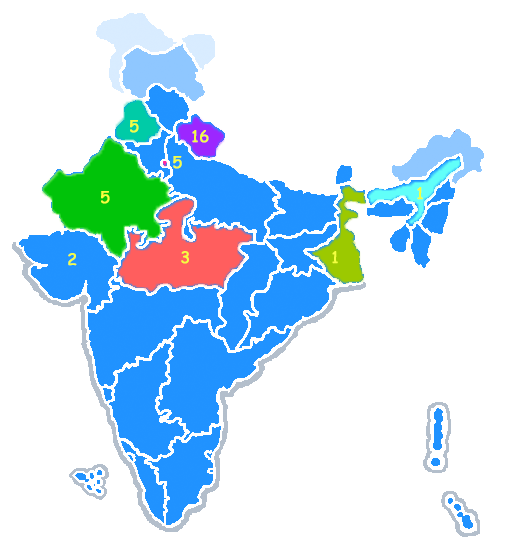
<style>
.page{position:relative;width:515px;height:560px;background:#ffffff}
.page>*{position:absolute;margin:0}
.t1{font:15.9px "ComicSansMS";letter-spacing:0.04em;color:#f4ff40;font-weight:bold}
</style>
<div class="page">
<p class="t1" style="left:130px;top:120px;width:9px;height:13px">5</p>
<p class="t1" style="left:192px;top:130px;width:17px;height:13px">16</p>
<p class="t1" style="left:173px;top:156px;width:9px;height:13px">5</p>
<p class="t1" style="left:101px;top:191px;width:9px;height:13px">5</p>
<p class="t1" style="left:417px;top:187px;width:6px;height:13px">1</p>
<p class="t1" style="left:68px;top:253px;width:9px;height:13px">2</p>
<p class="t1" style="left:181px;top:251px;width:8px;height:13px">3</p>
<p class="t1" style="left:332px;top:251px;width:6px;height:13px">1</p>
</div>
